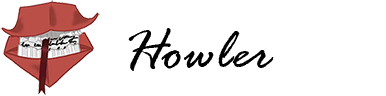
<style>
.page{position:relative;width:386px;height:96px;background:#ffffff}
.page>*{position:absolute;margin:0}
.t1{font:60px "RageItalic";color:#000000}
</style>
<div class="page">
<p class="t1" style="left:128px;top:28px;width:146px;height:43px">Howler</p>
</div>
